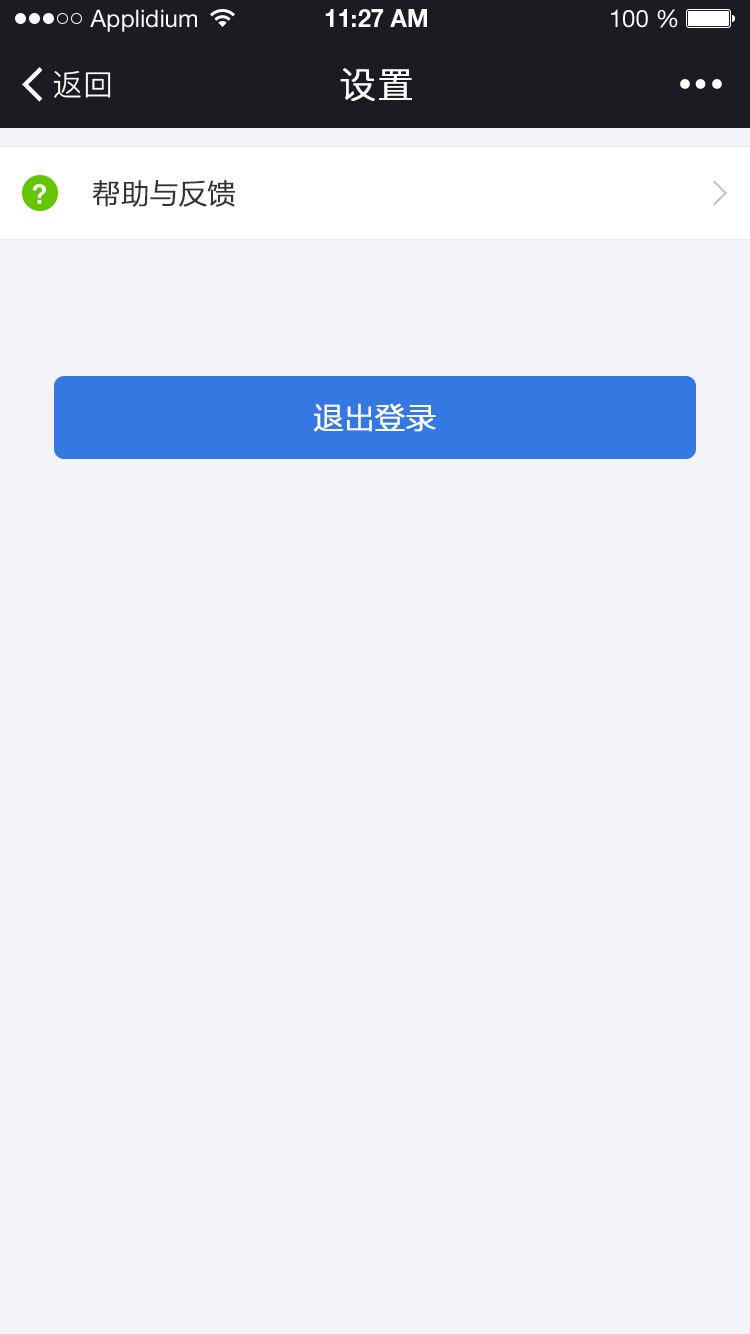
<style>
.page{position:relative;width:750px;height:1334px;background:#f4f3f9}
.page>*{position:absolute;margin:0}
.t1{font:24px "HelveticaNeueLTStd-Roman";color:#ffffff}
.t2{font:24px "HelveticaNeueLTStd-Bd";color:#ffffff}
.t3{font:30px "PingFang-SC-Regular";letter-spacing:0.025em;color:#ffffff}
.t4{font:36px "PingFang-SC-Regular";letter-spacing:0.025em;color:#ffffff;font-weight:bold}
.t5{font:28px "FZLTXHK--GBK1-0";color:#333333;font-weight:bold}
.t6{font:30px "FZLTXHK--GBK1-0";color:#ffffff;font-weight:bold}
</style>
<div class="page">
<p class="t1" style="left:90px;top:9px;width:107px;height:23px">Applidium</p>
<p class="t2" style="left:325px;top:9px;width:102px;height:18px">11:27 AM</p>
<p class="t1" style="left:611px;top:9px;width:67px;height:19px">100 %</p>
<p class="t3" style="left:53px;top:71px;width:58px;height:27px">返回</p>
<p class="t4" style="left:340px;top:68px;width:72px;height:33px">设置</p>
<p class="t5" style="left:92px;top:180px;width:143px;height:27px">帮助与反馈</p>
<p class="t6" style="left:314px;top:403px;width:122px;height:29px">退出登录</p>
</div>
